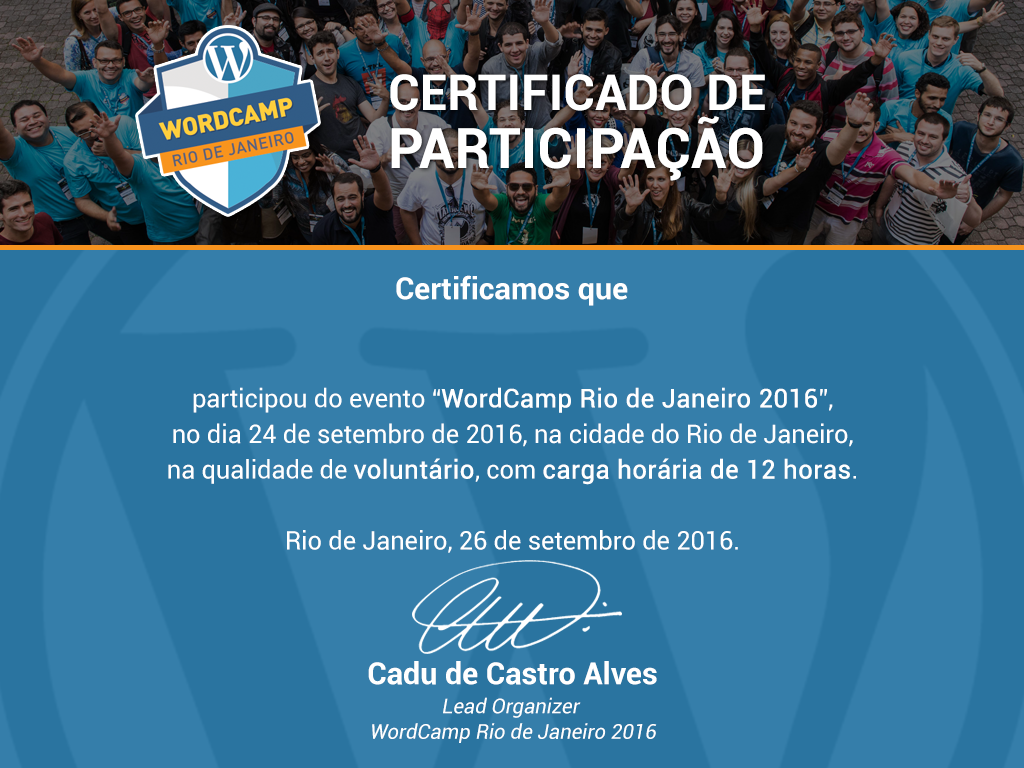
<style>
.page{position:relative;width:1024px;height:768px;background:#357eaa}
.page>*{position:absolute;margin:0}
.t1{font:49.7px/58px "Roboto-Bold";color:#ffffff;text-transform:uppercase}
.t2{font:55.9px/58px "Roboto-Bold";color:#ffffff;text-transform:uppercase}
.t3{font:30.5px "Roboto-Bold";color:#ffffff}
.t4{font:25.4px/35.6px "Roboto-Regular";color:#ffffff}
.t5{font:25.4px/35.6px "Roboto-Regular";color:#ffffff;font-weight:bold}
.t6{font:20.3px/25.4px "Roboto-Regular";color:#ffffff;font-style:italic}
</style>
<div class="page">
<p class="t1" style="left:390px;top:74px;width:375px;height:107px">certificado de<br><span class="t2">participação</span></p>
<p class="t3" style="left:396px;top:275px;width:232px;height:31px">Certificamos que</p>
<p class="t4" style="left:168px;top:387px;width:688px;height:166px;text-align:center">participou do evento “<span class="t5">WordCamp Rio de Janeiro 2016</span>”,<br>no dia 24 de setembro de 2016, na cidade do Rio de Janeiro,<br>na qualidade de <span class="t5">voluntário</span>, com <span class="t5">carga horária de 12 horas</span>.<br><br>Rio de Janeiro, 26 de setembro de 2016.</p>
<p class="t3" style="left:368px;top:661px;width:289px;height:24px">Cadu de Castro Alves</p>
<p class="t6" style="left:372px;top:697px;width:285px;height:46px;text-align:center">Lead Organizer <br>WordCamp Rio de Janeiro 2016</p>
</div>
